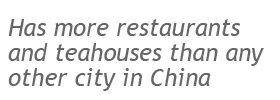
<style>
.page{position:relative;width:280px;height:100px;background:#ffffff}
.page>*{position:absolute;margin:0}
.t1{font:24px/25px "TrebuchetMS-Italic";color:#666666}
</style>
<div class="page">
<p class="t1" style="left:8px;top:19px;width:256px;height:72px">Has more restaurants <br>and teahouses than any <br>other city in China</p>
</div>
